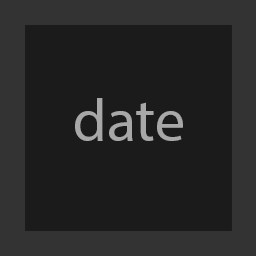
<style>
.page{position:relative;width:256px;height:256px;background:#1b1b1b}
.page>*{position:absolute;margin:0}
.t1{font:60px "MyriadPro-Regular";color:#a8a8a8}
</style>
<div class="page">
<p class="t1" style="left:75px;top:98px;width:108px;height:43px">date</p>
</div>
